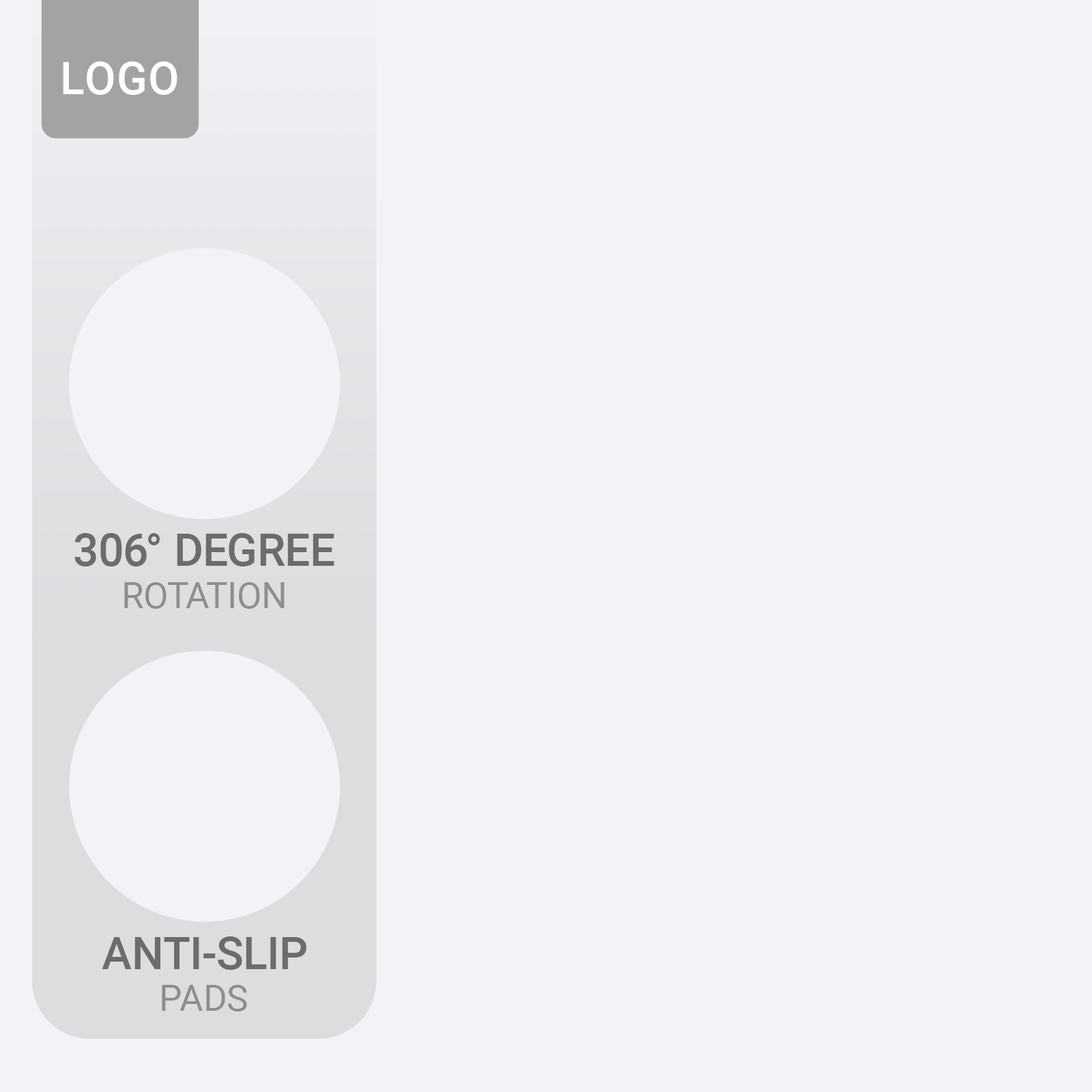
<style>
.page{position:relative;width:1092px;height:1092px;background:#f2f3f6}
.page>*{position:absolute;margin:0}
.t1{font:45.1px "Roboto-Medium";color:#ffffff;text-transform:uppercase}
.t2{font:45.1px "Roboto-Medium";color:#6c6c6c}
.t3{font:36.4px "Roboto-Regular";color:#8d8e8e}
.t4{font:36.4px "Roboto-Regular";color:#8d8d8e}
</style>
<div class="page">
<p class="t1" style="left:63px;top:61px;width:114px;height:34px">logo</p>
<p class="t2" style="left:74px;top:533px;width:260px;height:33px">306° DEGREE</p>
<p class="t3" style="left:124px;top:582px;width:161px;height:27px">ROTATION</p>
<p class="t2" style="left:102px;top:936px;width:204px;height:34px">ANTI-SLIP</p>
<p class="t4" style="left:162px;top:985px;width:85px;height:26px">PADS</p>
</div>
